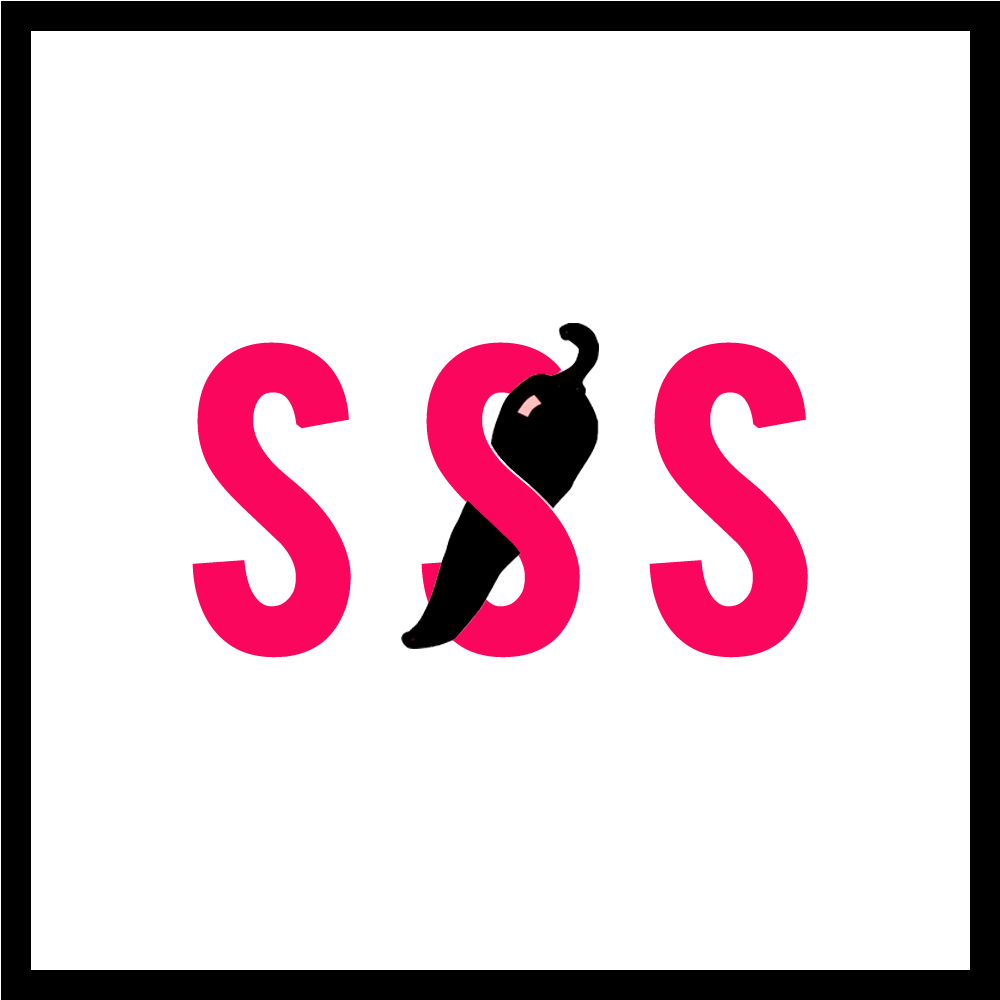
<style>
.page{position:relative;width:1000px;height:1000px;background:#ffffff}
.page>*{position:absolute;margin:0}
.t1{font:334.7px "Bebas";letter-spacing:0.12em;color:#fa065d;font-weight:bold}
</style>
<div class="page">
<p class="t1" style="left:192px;top:342px;width:616px;height:316px">SSS</p>
</div>
